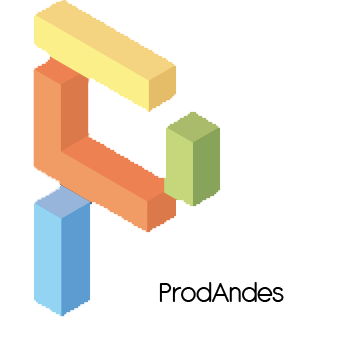
<style>
.page{position:relative;width:350px;height:350px;background:#ffffff}
.page>*{position:absolute;margin:0}
.t1{font:30px "Antipasto";color:#000000}
</style>
<div class="page">
<p class="t1" style="left:159px;top:282px;width:125px;height:20px">ProdAndes</p>
</div>
